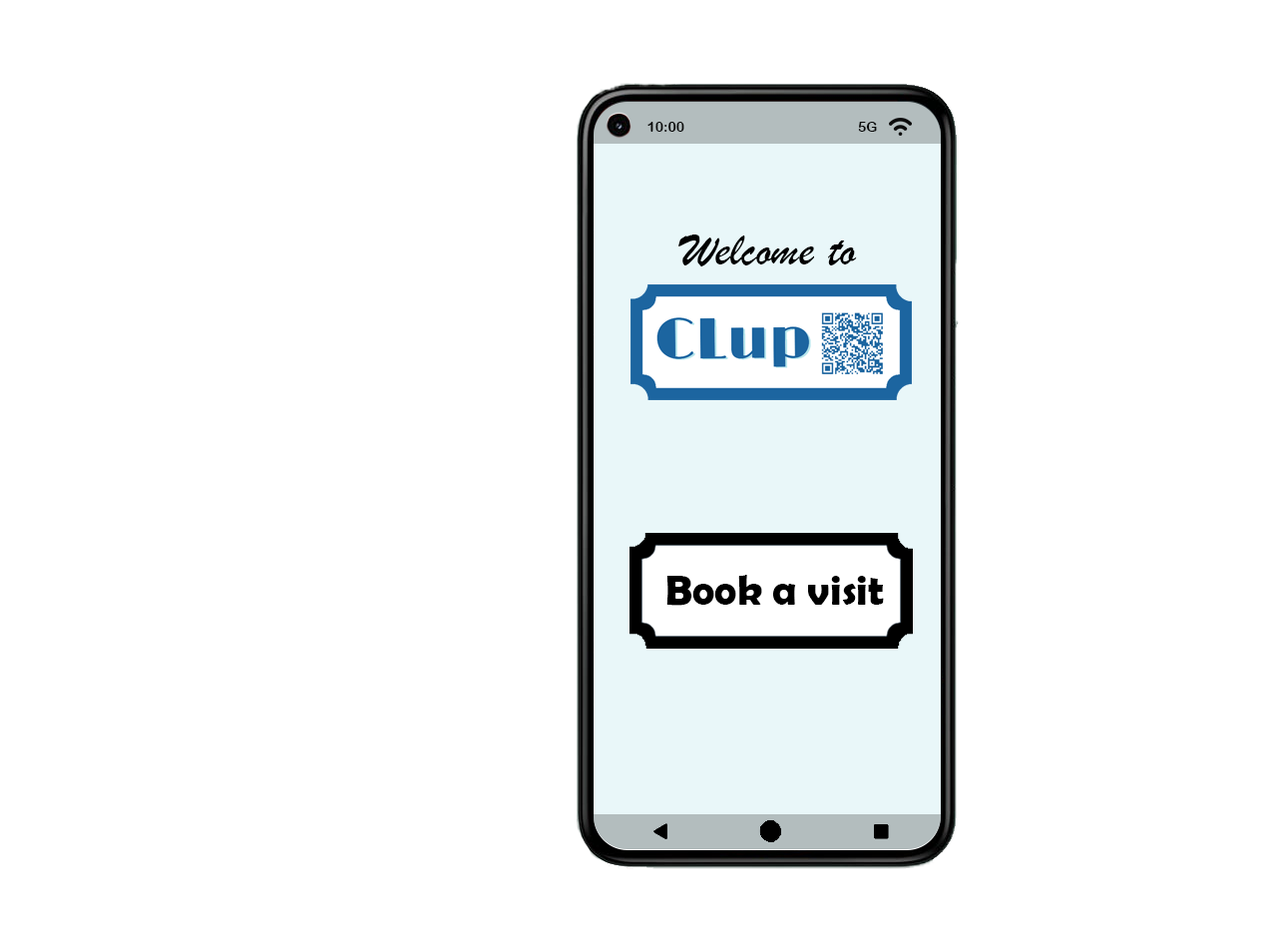
<style>
.page{position:relative;width:1261px;height:946px;background:#ffffff}
.page>*{position:absolute;margin:0}
.t1{font:14px "ArialRoundedMTBold";color:#000000}
.t2{font:49.9px "BrushScriptMT";color:#000000}
.t3{font:41.9px "BerlinSansFBDemi-Bold";color:#000000}
</style>
<div class="page">
<p class="t1" style="left:647px;top:122px;width:37px;height:10px">10:00</p>
<p class="t1" style="left:858px;top:122px;width:19px;height:10px">5G</p>
<p class="t2" style="left:678px;top:234px;width:179px;height:32px">Welcome to</p>
<p class="t3" style="left:666px;top:575px;width:218px;height:31px">Book a visit</p>
</div>
